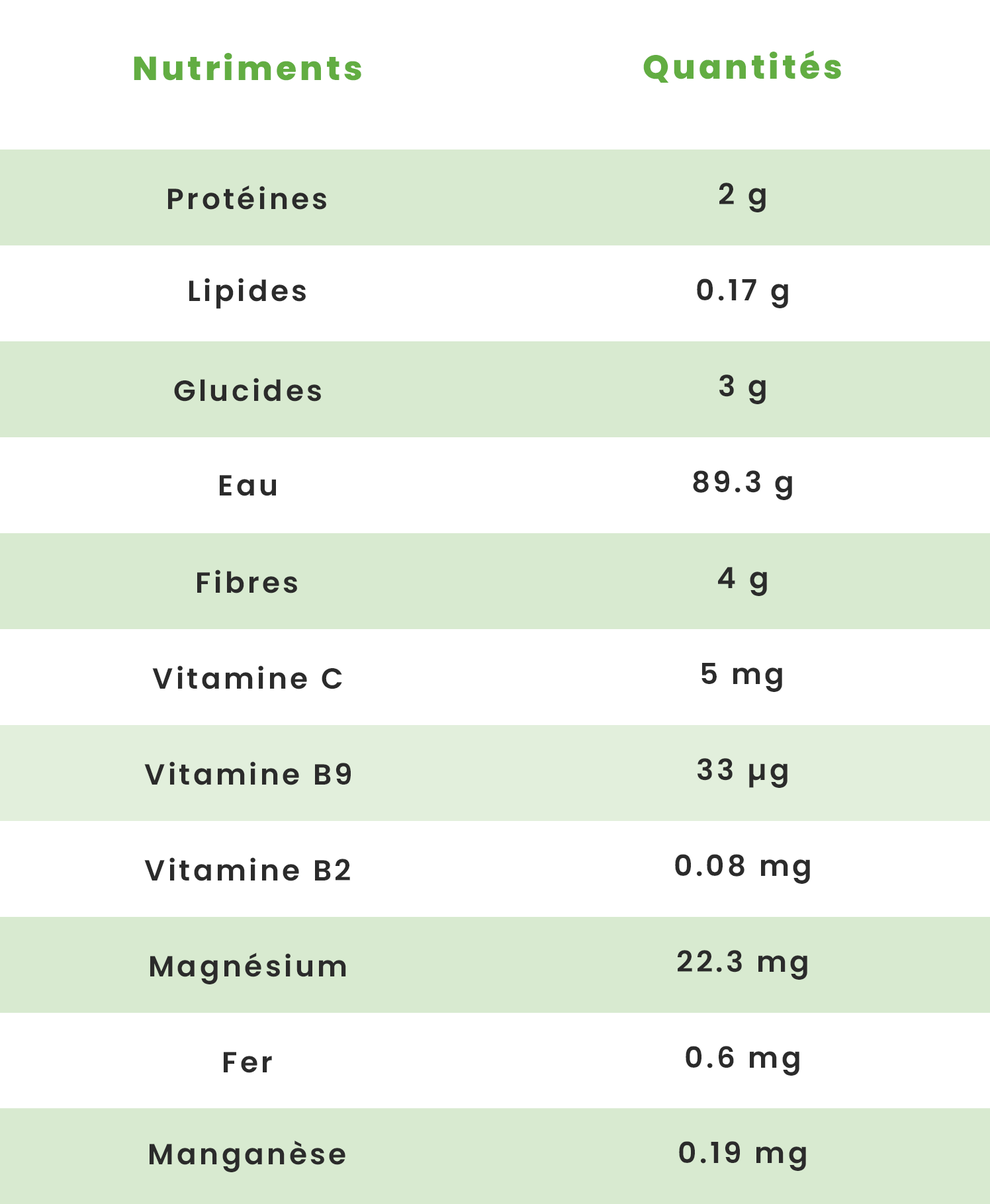
<style>
.page{position:relative;width:990px;height:1204px;background:#ffffff}
.page>*{position:absolute;margin:0}
.t1{font:33.3px "Poppins-ExtraBold";letter-spacing:0.1em;color:#62ad42}
.t2{font:29.1px "Poppins-SemiBold";letter-spacing:0.1em;color:#2b2b2b}
</style>
<div class="page">
<p class="t1" style="left:134px;top:53px;width:227px;height:28px">Nutriments</p>
<p class="t1" style="left:643px;top:50px;width:198px;height:33px">Quantités</p>
<p class="t2" style="left:168px;top:185px;width:158px;height:25px">Protéines</p>
<p class="t2" style="left:719px;top:183px;width:47px;height:29px">2 g</p>
<p class="t2" style="left:189px;top:278px;width:117px;height:31px">Lipides</p>
<p class="t2" style="left:697px;top:279px;width:91px;height:29px">0.17 g</p>
<p class="t2" style="left:174px;top:378px;width:147px;height:24px">Glucides</p>
<p class="t2" style="left:719px;top:375px;width:47px;height:29px">3 g</p>
<p class="t2" style="left:693px;top:471px;width:99px;height:29px">89.3 g</p>
<p class="t2" style="left:220px;top:475px;width:56px;height:21px">Eau</p>
<p class="t2" style="left:197px;top:570px;width:100px;height:24px">Fibres</p>
<p class="t2" style="left:718px;top:567px;width:49px;height:29px">4 g</p>
<p class="t2" style="left:152px;top:666px;width:190px;height:24px">Vitamine C</p>
<p class="t2" style="left:701px;top:663px;width:81px;height:29px">5 mg</p>
<p class="t2" style="left:144px;top:762px;width:207px;height:24px">Vitamine B9</p>
<p class="t2" style="left:698px;top:758px;width:90px;height:30px">33 µg</p>
<p class="t2" style="left:144px;top:858px;width:206px;height:23px">Vitamine B2</p>
<p class="t2" style="left:675px;top:854px;width:135px;height:30px">0.08 mg</p>
<p class="t2" style="left:150px;top:953px;width:196px;height:32px">Magnésium</p>
<p class="t2" style="left:678px;top:950px;width:129px;height:30px">22.3 mg</p>
<p class="t2" style="left:686px;top:1046px;width:113px;height:30px">0.6 mg</p>
<p class="t2" style="left:224px;top:1052px;width:48px;height:21px">Fer</p>
<p class="t2" style="left:150px;top:1141px;width:195px;height:32px">Manganèse</p>
<p class="t2" style="left:679px;top:1142px;width:127px;height:29px">0.19 mg</p>
</div>
